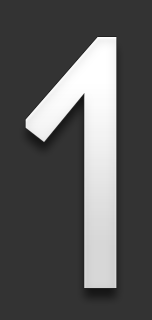
<style>
.page{position:relative;width:152px;height:320px;background:#333333}
.page>*{position:absolute;margin:0}
.t1{font:344.1px "Prelude-Medium";color:#ffffff}
</style>
<div class="page">
<p class="t1" style="left:25px;top:37px;width:92px;height:251px">1</p>
<p class="t1" style="left:25px;top:37px;width:92px;height:251px">1</p>
</div>
